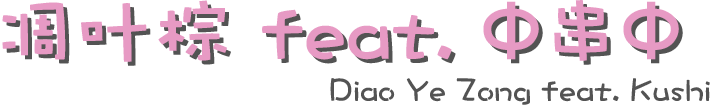
<style>
.page{position:relative;width:715px;height:107px;background:#ffffff}
.page>*{position:absolute;margin:0}
.t1{font:80px "DFCraftYu-W7-WING-RKSJ-H";color:#e79ac4}
.t2{font:80px "DFCraftYu-W7-WING-RKSJ-H"}
.t3{font:32px "DFCraftYu-W7-WING-RKSJ-H";color:#535353}
</style>
<div class="page">
<p class="t1" style="left:2px;top:0px;width:677px;height:62px">凋叶棕 feat. Φ串Φ</p>
<p class="t2" style="left:6px;top:4px;width:677px;height:62px">凋叶棕 feat. Φ串Φ</p>
<p class="t3" style="left:330px;top:78px;width:380px;height:27px">Diao Ye Zong feat. Kushi</p>
</div>
